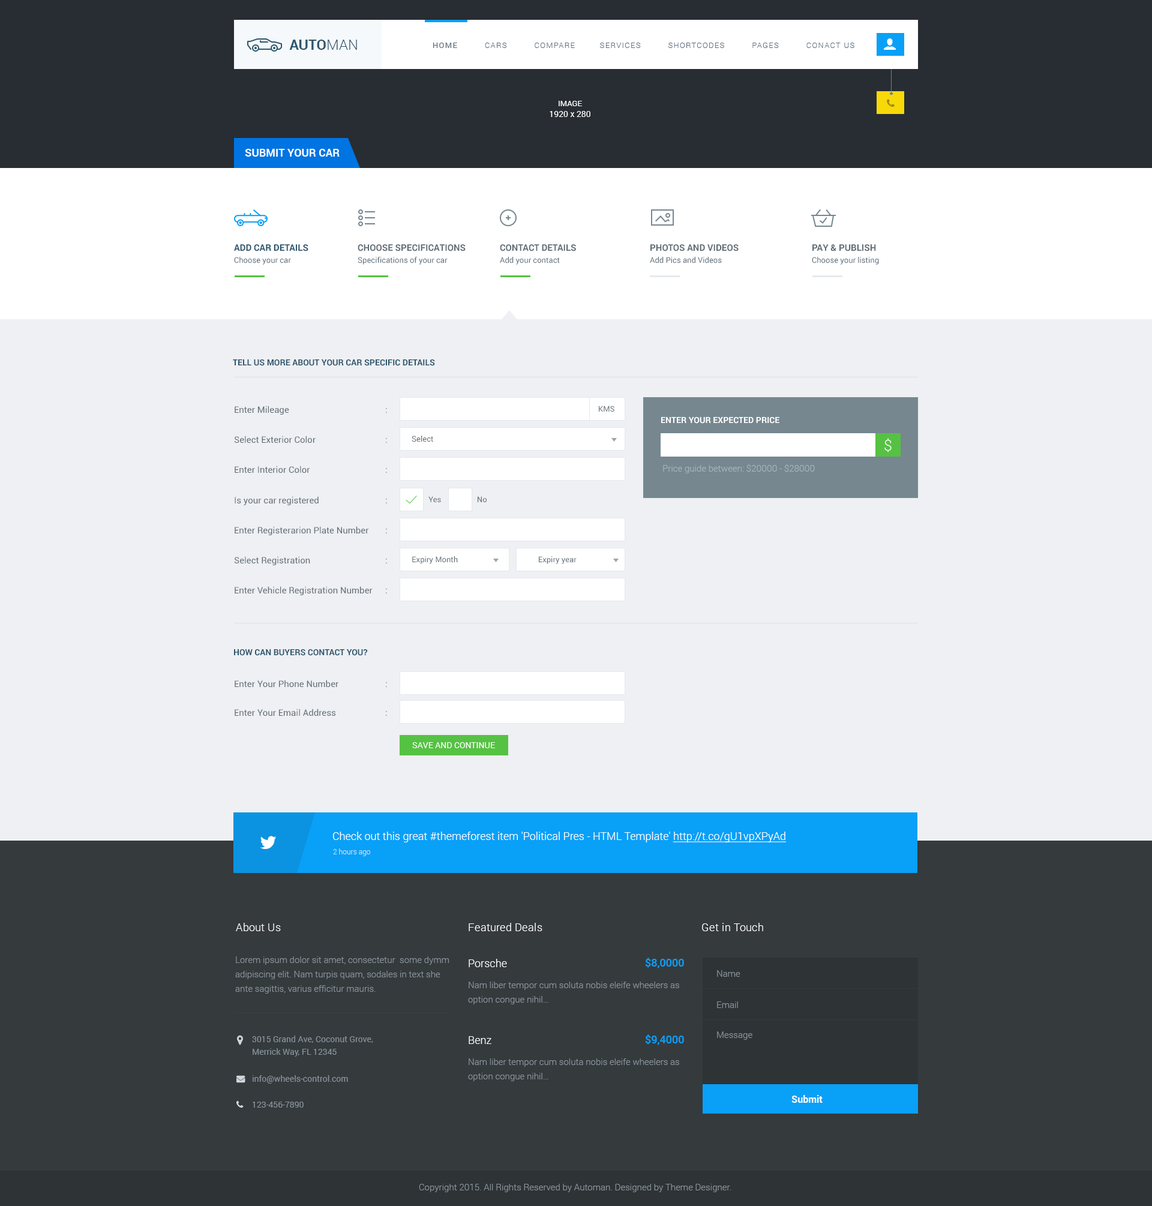
<style>
.page{position:relative;width:1152px;height:1206px;background:#eef0f3}
.page>*{position:absolute;margin:0}
.t1{font:14.4px "Roboto-Bold";color:#2e566e;text-transform:uppercase}
.t2{font:14.4px "Roboto-Light";color:#2e566e;text-transform:uppercase}
.t3{font:7.8px "Roboto-Light";letter-spacing:0.1em;color:#5d6e7b;text-transform:uppercase}
.t4{font:7.8px "Roboto-Regular";letter-spacing:0.1em;color:#5d6e7b;text-transform:uppercase}
.t5{font:8.4px/10.8px "Roboto-Regular";color:#ffffff}
.t6{font:7.8px/10.8px "Roboto-Regular";color:#ffffff}
.t7{font:10.8px "Roboto-Bold";color:#ffffff;text-transform:uppercase}
.t8{font:9px/12px "Roboto-Bold";color:#2e566e;text-transform:uppercase}
.t9{font:7.8px/12px "Roboto-Regular";color:#5d6e7b}
.t10{font:9px/12px "Roboto-Bold";color:#616d75;text-transform:uppercase}
.t11{font:8.4px "Roboto-Bold";color:#2e566e;text-transform:uppercase}
.t12{font:9px "Roboto-Regular";color:#616d75}
.t13{font:7.8px "Roboto-Regular";color:#616d75}
.t14{font:8.4px "Roboto-Bold";color:#ffffff;text-transform:uppercase}
.t15{font:15px "Roboto-Light";color:#ffffff;text-transform:uppercase}
.t16{font:9px "Roboto-Light";color:#a3b7c0}
.t17{font:8.4px "Roboto-Regular";color:#ffffff;text-transform:uppercase}
.t18{font:10.8px "Roboto-Light";color:#ffffff}
.t19{font:10.8px "Roboto-Light";color:#ffffff;text-decoration:underline}
.t20{font:7.2px "Roboto-Light";color:#c3e1f4}
.t21{font:10.8px "Roboto-Light";letter-spacing:0.025em;color:#ffffff}
.t22{font:9px/14.4px "Roboto-Light";color:#88949b}
.t23{font:10.8px "Roboto-Medium";color:#09a0f7}
.t24{font:9px "Roboto-Light";color:#88949b}
.t25{font:8.4px/12.6px "Roboto-Regular";color:#88949b}
.t26{font:8.4px "Roboto-Regular";color:#88949b}
.t27{font:9.6px "Roboto-Bold";color:#ffffff}
</style>
<div class="page">
<p class="t1" style="left:289px;top:40px;width:68px;height:10px">Auto<span class="t2">man</span></p>
<p class="t3" style="left:433px;top:43px;width:421px;height:5px"><span class="t4">Home</span>          Cars          COMPARE         Services          Shortcodes          Pages          Conact us</p>
<p class="t5" style="left:550px;top:101px;width:40px;height:16px;text-align:center"><span class="t6">IMAGE<br></span>1920 x 280</p>
<p class="t7" style="left:245px;top:149px;width:95px;height:8px">Submit your car</p>
<p class="t8" style="left:234px;top:244px;width:74px;height:21px">ADD CAR DETAILS<br><span class="t9">Choose your car</span></p>
<p class="t9" style="left:358px;top:244px;width:108px;height:21px"><span class="t10">CHOOSE SPECIFICATIONS<br></span>Specifications of your car</p>
<p class="t9" style="left:500px;top:244px;width:76px;height:21px"><span class="t10">CONTACT DETAILS<br></span>Add your contact</p>
<p class="t9" style="left:650px;top:244px;width:89px;height:19px"><span class="t10">PHOTOS AND VIDEOS<br></span>Add Pics and Videos</p>
<p class="t9" style="left:812px;top:244px;width:67px;height:21px"><span class="t10">PAY &amp; PUBLISH<br></span>Choose your listing</p>
<p class="t11" style="left:233px;top:359px;width:202px;height:7px">Tell us more about your car specific details</p>
<p class="t12" style="left:235px;top:406px;width:152px;height:9px">Enter Mileage     :</p>
<p class="t13" style="left:599px;top:406px;width:15px;height:6px">KMS</p>
<p class="t14" style="left:661px;top:417px;width:118px;height:7px">Enter your expected price</p>
<p class="t12" style="left:234px;top:436px;width:153px;height:7px">Select Exterior Color    :</p>
<p class="t13" style="left:412px;top:436px;width:21px;height:6px">Select</p>
<p class="t15" style="left:884px;top:438px;width:8px;height:14px">$</p>
<p class="t12" style="left:235px;top:466px;width:152px;height:7px">Enter Interior Color    :</p>
<p class="t16" style="left:663px;top:464px;width:152px;height:9px">Price guide between: $20000 - $28000</p>
<p class="t12" style="left:235px;top:496px;width:152px;height:9px">Is your car registered    :</p>
<p class="t13" style="left:428px;top:496px;width:13px;height:6px">Yes</p>
<p class="t13" style="left:478px;top:496px;width:9px;height:6px">No</p>
<p class="t12" style="left:235px;top:526px;width:152px;height:9px">Enter Registerarion Plate Number :</p>
<p class="t12" style="left:234px;top:556px;width:153px;height:9px">Select Registration     :</p>
<p class="t13" style="left:412px;top:556px;width:46px;height:8px">Expiry Month</p>
<p class="t13" style="left:539px;top:556px;width:38px;height:8px">Expiry year</p>
<p class="t12" style="left:235px;top:586px;width:152px;height:9px">Enter Vehicle Registration Number :</p>
<p class="t11" style="left:234px;top:649px;width:134px;height:7px">How can buyers contact you?</p>
<p class="t12" style="left:235px;top:680px;width:152px;height:8px">Enter Your Phone Number   :</p>
<p class="t12" style="left:235px;top:709px;width:152px;height:7px">Enter Your Email Address   :</p>
<p class="t17" style="left:412px;top:742px;width:83px;height:6px">Save and Continue</p>
<p class="t18" style="left:333px;top:832px;width:454px;height:10px">Check out this great #themeforest item 'Political Pres - HTML Template' <span class="t19">http://t.co/gU1vpXPyAd</span></p>
<p class="t20" style="left:333px;top:848px;width:37px;height:8px">2 hours ago</p>
<p class="t21" style="left:236px;top:923px;width:45px;height:8px">About Us</p>
<p class="t21" style="left:469px;top:923px;width:73px;height:8px">Featured Deals</p>
<p class="t21" style="left:702px;top:923px;width:61px;height:8px">Get in Touch</p>
<p class="t22" style="left:235px;top:956px;width:214px;height:38px">Lorem ipsum dolor sit amet, consectetur  some dymm<br>adipiscing elit. Nam turpis quam, sodales in text she<br>ante sagittis, varius efficitur mauris.</p>
<p class="t18" style="left:469px;top:959px;width:38px;height:8px">Porsche</p>
<p class="t23" style="left:645px;top:958px;width:39px;height:10px">$8,0000</p>
<p class="t24" style="left:717px;top:970px;width:23px;height:7px">Name</p>
<p class="t22" style="left:468px;top:982px;width:211px;height:22px">Nam liber tempor cum soluta nobis eleife wheelers as<br>option congue nihil…</p>
<p class="t24" style="left:717px;top:1001px;width:21px;height:7px">Email</p>
<p class="t25" style="left:252px;top:1036px;width:121px;height:21px">3015 Grand Ave, Coconut Grove,<br>Merrick Way, FL 12345</p>
<p class="t18" style="left:469px;top:1036px;width:22px;height:8px">Benz</p>
<p class="t23" style="left:645px;top:1034px;width:39px;height:11px">$9,4000</p>
<p class="t24" style="left:717px;top:1031px;width:35px;height:9px">Message</p>
<p class="t22" style="left:468px;top:1058px;width:211px;height:23px">Nam liber tempor cum soluta nobis eleife wheelers as<br>option congue nihil…</p>
<p class="t26" style="left:253px;top:1075px;width:95px;height:9px">info@wheels-control.com</p>
<p class="t27" style="left:791px;top:1095px;width:32px;height:8px">Submit</p>
<p class="t26" style="left:253px;top:1102px;width:51px;height:6px">123-456-7890</p>
<p class="t24" style="left:419px;top:1184px;width:312px;height:8px">Copyright 2015. All Rights Reserved by Automan. Designed by Theme Designer.</p>
</div>
